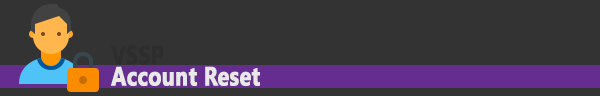
<style>
.page{position:relative;width:600px;height:96px;background:#333333}
.page>*{position:absolute;margin:0}
.t1{font:26.5px/21.2px "SegoeUI-Bold";color:#e9e8e8;font-weight:bold;scale:0.8 1}
.t2{font:26.5px/21.2px "SegoeUI-Bold";color:#2d2d2d;font-weight:bold;scale:0.8 1}
</style>
<div class="page">
<p class="t1" style="left:111px;top:45px;width:149px;height:41px"><span class="t2">VSSP<br></span>Account Reset</p>
</div>
